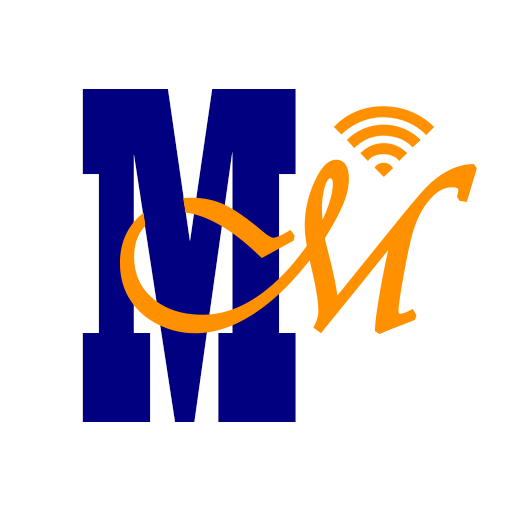
<style>
.page{position:relative;width:512px;height:512px;background:#ffffff}
.page>*{position:absolute;margin:0}
.t1{font:500px "Playbill";letter-spacing:0.05em;color:#000080}
</style>
<div class="page">
<p class="t1" style="left:82px;top:89px;width:214px;height:333px">M</p>
</div>
